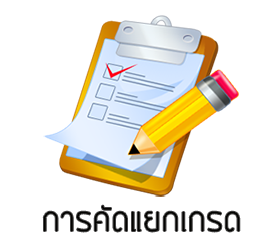
<style>
.page{position:relative;width:280px;height:245px;background:#ffffff}
.page>*{position:absolute;margin:0}
.t1{font:30px "BangnaNew";color:#020200}
</style>
<div class="page">
<p class="t1" style="left:43px;top:205px;width:197px;height:27px">การคัดแยกเกรด</p>
</div>
